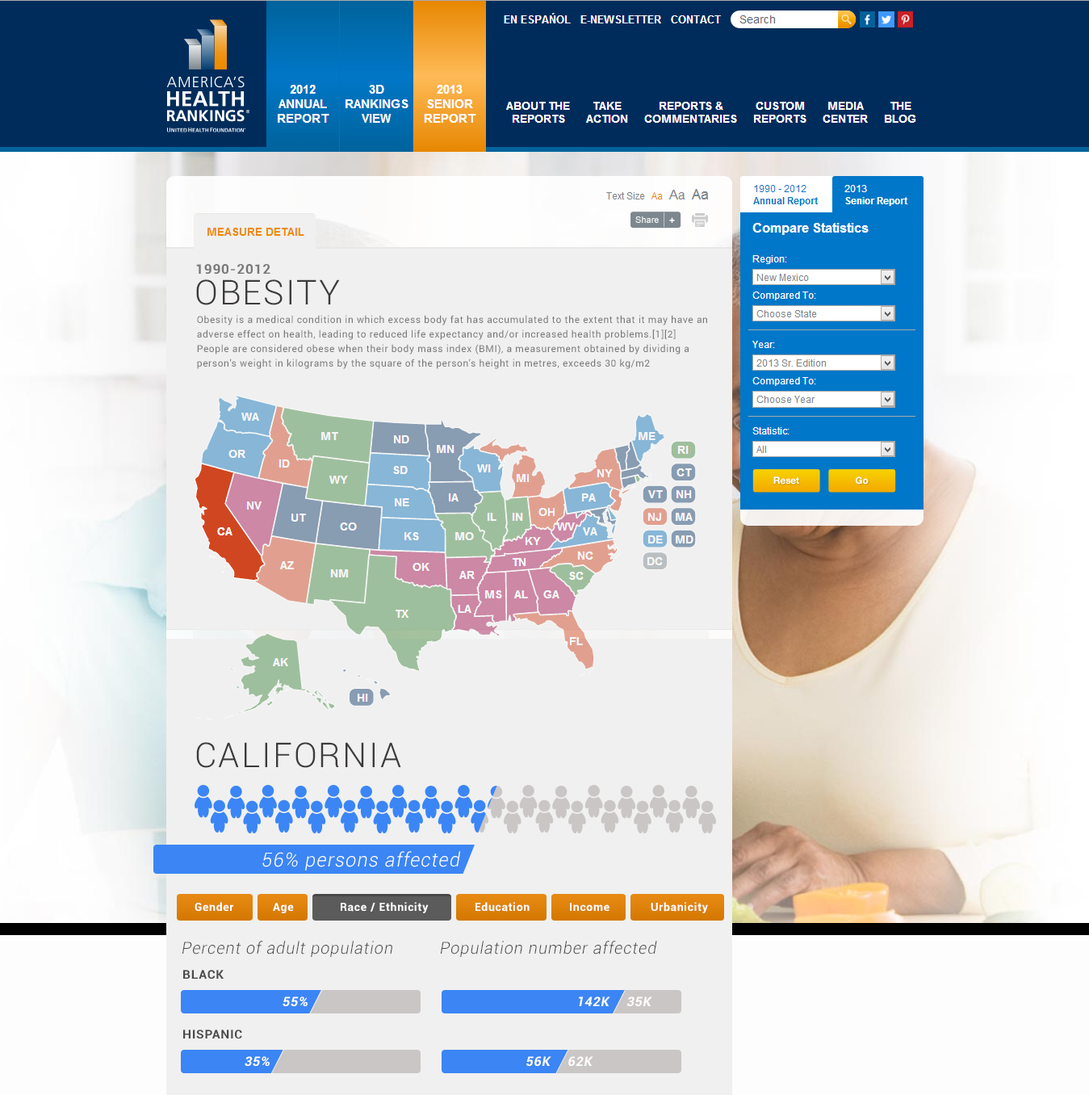
<style>
.page{position:relative;width:1089px;height:1095px;background:#f0f0f0}
.page>*{position:absolute;margin:0}
.t1{font:13.6px "Roboto-Bold";letter-spacing:0.05em;color:#787878}
.t2{font:34.4px "Roboto-Light";letter-spacing:0.05em;color:#3d3a3a}
.t3{font:9.7px/14.5px "Roboto-Regular";letter-spacing:0.05em;color:#7b7979}
.t4{font:19.4px "Roboto-Light";letter-spacing:0.05em;color:#ffffff;font-style:italic}
.t5{font:11.3px "Roboto-Bold";letter-spacing:0.05em;color:#ffffff}
.t6{font:16.5px "Roboto-Light";letter-spacing:0.05em;color:#4a4a4a;font-style:italic}
.t7{font:12.2px "Roboto-Bold";letter-spacing:0.05em;color:#4a4a4a}
.t8{font:12.9px "Roboto-Bold";letter-spacing:0.05em;color:#ffffff;font-style:italic}
</style>
<div class="page">
<p class="t1" style="left:196px;top:264px;width:74px;height:10px">1990-2012</p>
<p class="t2" style="left:196px;top:279px;width:144px;height:26px">OBESITY</p>
<p class="t3" style="left:197px;top:315px;width:510px;height:54px">Obesity is a medical condition in which excess body fat has accumulated to the extent that it may have an adverse effect on health, leading to reduced life expectancy and/or increased health problems.[1][2] People are considered obese when their body mass index (BMI), a measurement obtained by dividing a person's weight in kilograms by the square of the person's height in metres, exceeds 30 kg/m2</p>
<p class="t2" style="left:196px;top:742px;width:205px;height:26px">CALIFORNIA</p>
<p class="t4" style="left:262px;top:851px;width:199px;height:19px">56% persons affected</p>
<p class="t5" style="left:195px;top:902px;width:38px;height:9px">Gender</p>
<p class="t5" style="left:273px;top:903px;width:21px;height:10px">Age</p>
<p class="t5" style="left:341px;top:902px;width:88px;height:11px">Race / Ethnicity</p>
<p class="t5" style="left:476px;top:902px;width:54px;height:10px">Education</p>
<p class="t5" style="left:570px;top:903px;width:40px;height:8px">Income</p>
<p class="t5" style="left:651px;top:902px;width:57px;height:11px">Urbanicity</p>
<p class="t6" style="left:182px;top:941px;width:210px;height:16px">Percent of adult population</p>
<p class="t6" style="left:440px;top:941px;width:217px;height:16px">Population number affected</p>
<p class="t7" style="left:183px;top:970px;width:41px;height:9px">BLACK</p>
<p class="t8" style="left:283px;top:996px;width:25px;height:11px">55%</p>
<p class="t8" style="left:579px;top:996px;width:31px;height:10px">142K</p>
<p class="t8" style="left:627px;top:996px;width:25px;height:11px">35K</p>
<p class="t7" style="left:183px;top:1029px;width:59px;height:9px">HISPANIC</p>
<p class="t8" style="left:245px;top:1056px;width:25px;height:11px">35%</p>
<p class="t8" style="left:526px;top:1056px;width:25px;height:11px">56K</p>
<p class="t8" style="left:568px;top:1056px;width:25px;height:10px">62K</p>
</div>
